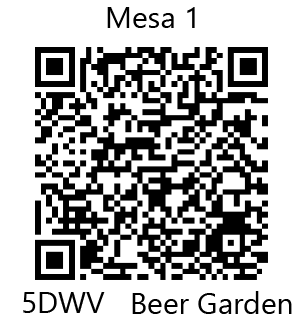
<style>
.page{position:relative;width:308px;height:327px;background:#ffffff}
.page>*{position:absolute;margin:0}
.t1{font:30px "SegoeUIHistoric";color:#000000}
</style>
<div class="page">
<p class="t1" style="left:107px;top:7px;width:88px;height:21px">Mesa 1</p>
<p class="t1" style="left:23px;top:292px;width:82px;height:21px">5DWV</p>
<p class="t1" style="left:132px;top:291px;width:160px;height:23px">Beer Garden</p>
</div>
